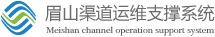
<style>
.page{position:relative;width:215px;height:37px;background:#ffffff}
.page>*{position:absolute;margin:0}
.t1{font:16.9px "MicrosoftYaHei";color:#6c6a6a}
.t2{font:8.9px "PlantagenetCherokee";color:#595757}
</style>
<div class="page">
<p class="t1" style="left:45px;top:4px;width:170px;height:18px">眉山渠道运维支撑系统</p>
<p class="t2" style="left:46px;top:26px;width:168px;height:10px">Meishan channel operation support system</p>
</div>
